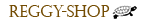
<style>
.page{position:relative;width:150px;height:25px;background:#ffffff}
.page>*{position:absolute;margin:0}
.t1{font:16px "PerpetuaTitlingMT-Light";color:#734c03}
</style>
<div class="page">
<p class="t1" style="left:9px;top:5px;width:101px;height:12px">REGGY-SHop</p>
</div>
